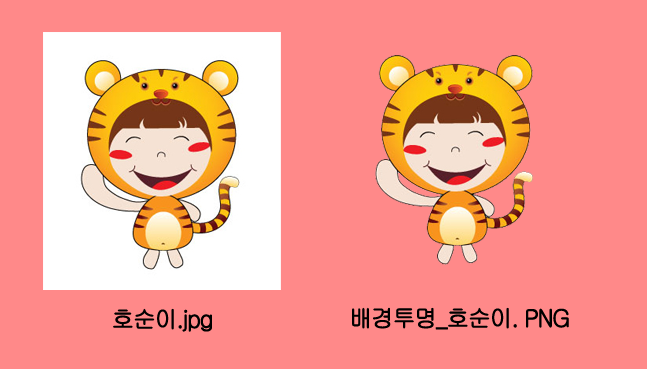
<style>
.page{position:relative;width:647px;height:369px;background:#ff8989}
.page>*{position:absolute;margin:0}
.t1{font:24.1px "Gulim";letter-spacing:-0.08em;color:#000000;font-weight:bold;scale:0.95 1}
</style>
<div class="page">
<p class="t1" style="left:113px;top:308px;width:99px;height:24px">호순이.jpg</p>
<p class="t1" style="left:352px;top:307px;width:217px;height:23px">배경투명_호순이. PNG</p>
</div>
